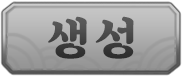
<style>
.page{position:relative;width:183px;height:76px}
.page>*{position:absolute;margin:0}
.t1{font:46.1px "SDKukdetopokki-bBd";letter-spacing:0.12em;color:#474747}
</style>
<div class="page">
<p class="t1" style="left:48px;top:16px;width:86px;height:43px">생성</p>
</div>
